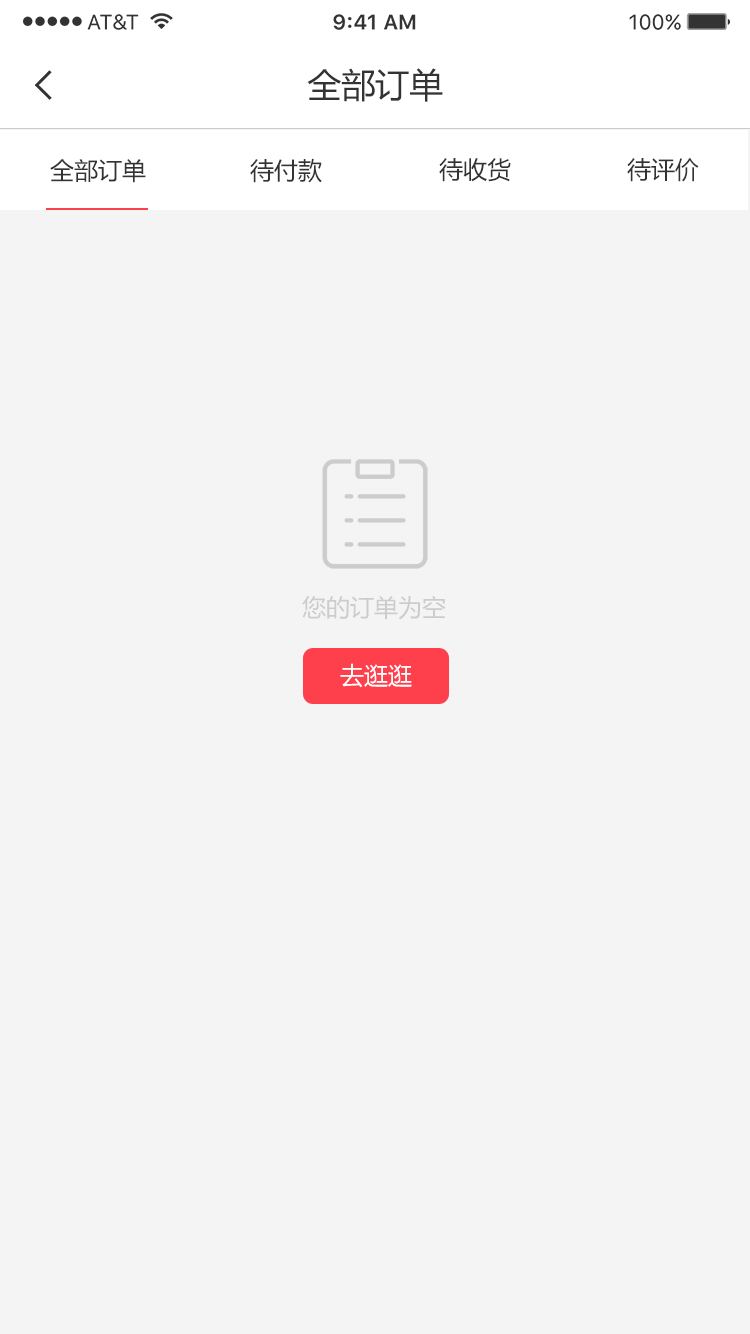
<style>
.page{position:relative;width:750px;height:1334px;background:#f4f4f4}
.page>*{position:absolute;margin:0}
.t1{font:34px "MicrosoftYaHei";color:#333333}
.t2{font:24px "MicrosoftYaHei";color:#333333}
.t3{font:24px "MicrosoftYaHei";color:#cccccc}
.t4{font:24px "MicrosoftYaHei";color:#ffffff}
</style>
<div class="page">
<p class="t1" style="left:307px;top:68px;width:136px;height:34px">全部订单</p>
<p class="t2" style="left:50px;top:159px;width:96px;height:24px">全部订单</p>
<p class="t2" style="left:250px;top:158px;width:72px;height:25px">待付款</p>
<p class="t2" style="left:439px;top:158px;width:72px;height:24px">待收货</p>
<p class="t2" style="left:627px;top:158px;width:72px;height:24px">待评价</p>
<p class="t3" style="left:302px;top:596px;width:144px;height:24px">您的订单为空</p>
<p class="t4" style="left:340px;top:663px;width:72px;height:25px">去逛逛</p>
</div>
